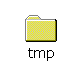
<style>
.page{position:relative;width:80px;height:80px;background:#ffffff}
.page>*{position:absolute;margin:0}
.t1{font:14px "MSReferenceSansSerif";color:#000000}
</style>
<div class="page">
<p class="t1" style="left:28px;top:48px;width:26px;height:13px">tmp</p>
</div>
